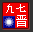
<style>
.page{position:relative;width:33px;height:32px;background:#f20000}
.page>*{position:absolute;margin:0}
.t1{font:10.4px "SimSun";color:#ffffff}
.t2{font:11.7px "SimSun";color:#ffffff}
</style>
<div class="page">
<p class="t1" style="left:6px;top:4px;width:20px;height:9px">九七</p>
<p class="t2" style="left:16px;top:15px;width:11px;height:12px">晋</p>
</div>
